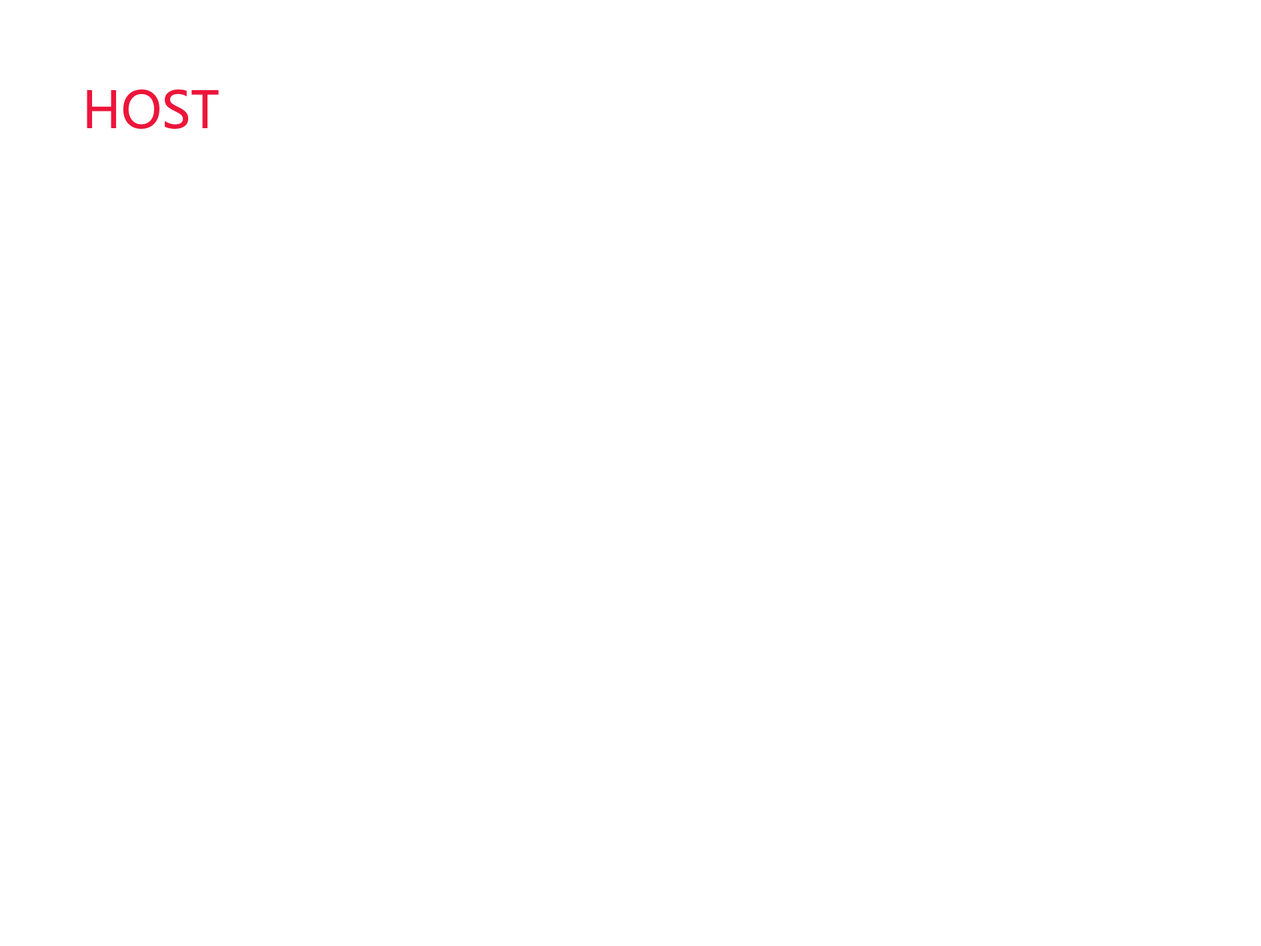
<style>
.page{position:relative;width:1261px;height:946px;background:#ffffff}
.page>*{position:absolute;margin:0}
.t1{font:50px "MicrosoftYaHei";color:#ed153a}
</style>
<div class="page">
<p class="t1" style="left:87px;top:89px;width:132px;height:40px">HOST</p>
</div>
